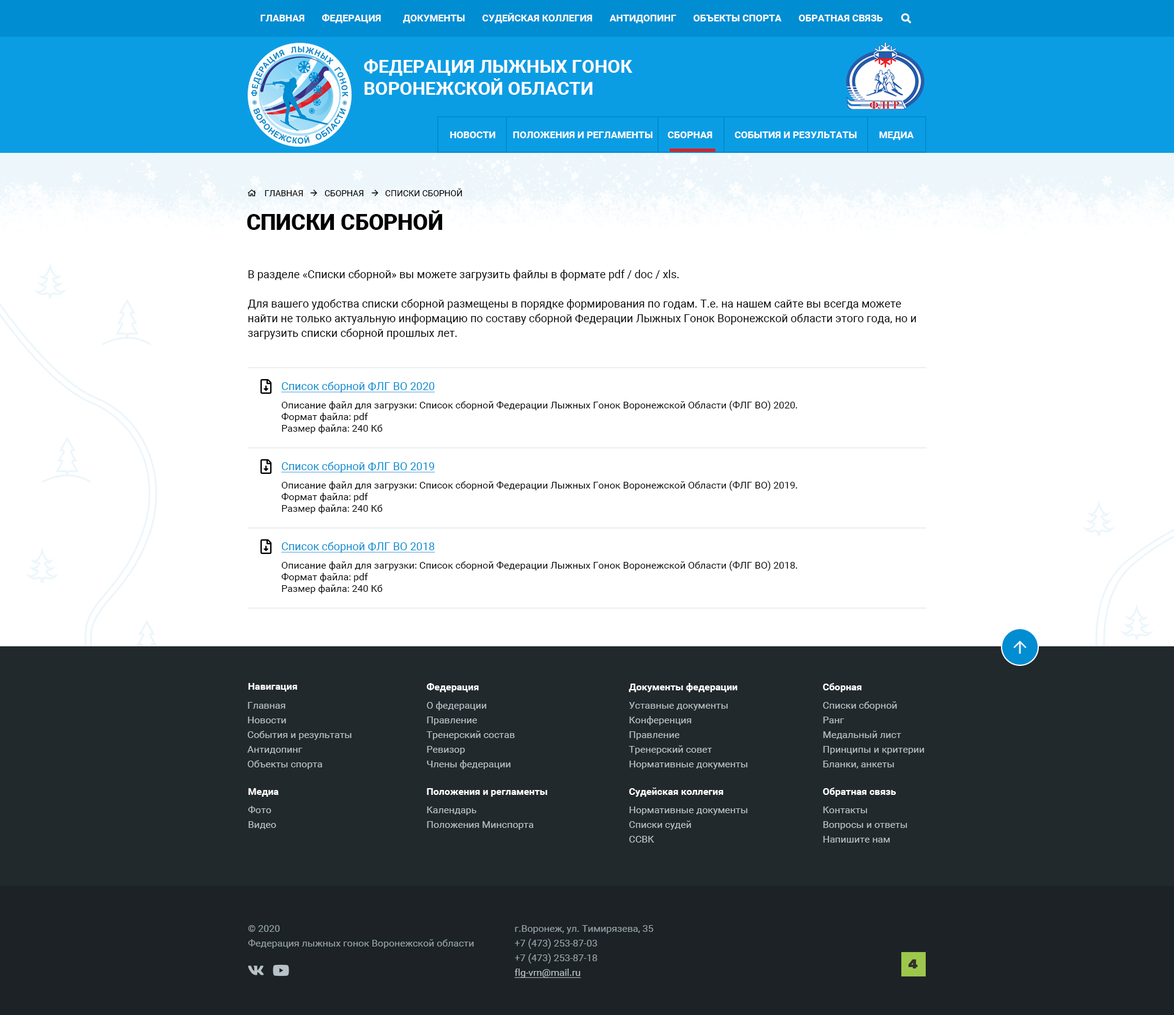
<style>
.page{position:relative;width:1174px;height:1015px;background:#ffffff}
.page>*{position:absolute;margin:0}
.t1{font:9.8px "Roboto-Bold";color:#ffffff;text-transform:uppercase}
.t2{font:18.3px "Roboto-Bold";color:#ffffff;text-transform:uppercase}
.t3{font:8.6px "Roboto-Regular";color:#000000;text-transform:uppercase}
.t4{font:22px "Roboto-Black";color:#000000;text-transform:uppercase}
.t5{font:11px/14.7px "Roboto-Regular";color:#000000}
.t6{font:11px "Roboto-Regular";color:#008dd2;text-decoration:underline}
.t7{font:9.8px "Roboto-Regular";color:#000000}
.t8{font:9.8px "Roboto-Bold";color:#ffffff}
.t9{font:9.8px/14.7px "Roboto-Regular";color:#b7c1c7}
.t10{font:9.8px/14.7px "Roboto-Regular";color:#94a1a9}
.t11{font:9.8px/14.7px "Roboto-Regular";color:#b7c1c7;text-decoration:underline}
</style>
<div class="page">
<p class="t1" style="left:261px;top:13px;width:622px;height:10px">Главная       Федерация         Документы       Судейская коллегия       Антидопинг       Объекты спорта       Обратная связь</p>
<p class="t2" style="left:364px;top:59px;width:269px;height:36px">ФЕДЕРАЦИЯ ЛЫЖНЫХ ГОНОК<br>воронежской области</p>
<p class="t1" style="left:450px;top:132px;width:464px;height:8px">Новости       Положения и регламенты      Сборная         События и результаты         Медиа</p>
<p class="t3" style="left:265px;top:188px;width:197px;height:8px">Главная          Сборная          Списки сборной</p>
<p class="t4" style="left:247px;top:210px;width:196px;height:20px">Списки сборной</p>
<p class="t5" style="left:248px;top:270px;width:668px;height:69px">В разделе «Списки сборной» вы можете загрузить файлы в формате pdf / doc / xls. <br><br>Для вашего удобства списки сборной размещены в порядке формирования по годам. Т.е. на нашем сайте вы всегда можете найти не только актуальную информацию по составу сборной Федерации Лыжных Гонок Воронежской области этого года, но и загрузить списки сборной прошлых лет.</p>
<p class="t6" style="left:281px;top:382px;width:155px;height:11px">Список сборной ФЛГ ВО 2020</p>
<p class="t7" style="left:281px;top:401px;width:517px;height:33px">Описание файл для загрузки: Список сборной Федерации Лыжных Гонок Воронежской Области (ФЛГ ВО) 2020. <br>Формат файла: pdf<br>Размер файла: 240 Кб</p>
<p class="t6" style="left:281px;top:462px;width:155px;height:11px">Список сборной ФЛГ ВО 2019</p>
<p class="t7" style="left:281px;top:481px;width:517px;height:33px">Описание файл для загрузки: Список сборной Федерации Лыжных Гонок Воронежской Области (ФЛГ ВО) 2019. <br>Формат файла: pdf<br>Размер файла: 240 Кб</p>
<p class="t6" style="left:281px;top:542px;width:155px;height:11px">Список сборной ФЛГ ВО 2018</p>
<p class="t7" style="left:281px;top:561px;width:517px;height:33px">Описание файл для загрузки: Список сборной Федерации Лыжных Гонок Воронежской Области (ФЛГ ВО) 2018. <br>Формат файла: pdf<br>Размер файла: 240 Кб</p>
<p class="t8" style="left:248px;top:683px;width:49px;height:9px">Навигация</p>
<p class="t8" style="left:427px;top:683px;width:52px;height:9px">Федерация</p>
<p class="t8" style="left:629px;top:683px;width:109px;height:9px">Документы федерации</p>
<p class="t8" style="left:823px;top:683px;width:39px;height:9px">Сборная</p>
<p class="t9" style="left:426px;top:702px;width:89px;height:67px">О федерации<br>Правление<br>Тренерский состав<br>Ревизор<br>Члены федерации</p>
<p class="t9" style="left:823px;top:702px;width:102px;height:67px">Списки сборной<br>Ранг<br>Медальный лист<br>Принципы и критерии<br>Бланки, анкеты</p>
<p class="t9" style="left:247px;top:702px;width:105px;height:67px">Главная<br>Новости<br>События и результаты<br>Антидопинг<br>Объекты спорта</p>
<p class="t9" style="left:629px;top:702px;width:119px;height:67px">Уставные документы<br>Конференция<br>Правление<br>Тренерский совет<br>Нормативные документы</p>
<p class="t8" style="left:248px;top:788px;width:31px;height:9px">Медиа</p>
<p class="t8" style="left:427px;top:788px;width:120px;height:9px">Положения и регламенты</p>
<p class="t8" style="left:629px;top:788px;width:95px;height:9px">Судейская коллегия</p>
<p class="t8" style="left:823px;top:788px;width:73px;height:9px">Обратная связь</p>
<p class="t9" style="left:248px;top:806px;width:28px;height:23px">Фото<br>Видео</p>
<p class="t9" style="left:427px;top:807px;width:107px;height:23px">Календарь<br>Положения Минспорта</p>
<p class="t9" style="left:629px;top:807px;width:119px;height:36px">Нормативные документы<br>Списки судей<br>ССВК</p>
<p class="t9" style="left:823px;top:807px;width:85px;height:36px">Контакты<br>Вопросы и ответы<br>Напишите нам</p>
<p class="t10" style="left:248px;top:925px;width:226px;height:24px">© 2020 <br>Федерация лыжных гонок Воронежской области</p>
<p class="t10" style="left:514px;top:925px;width:140px;height:54px">г.Воронеж, ул. Тимирязева, 35<br>+7 (473) 253-87-03<br>+7 (473) 253-87-18<br><span class="t11">flg-vrn@mail.ru</span></p>
</div>
